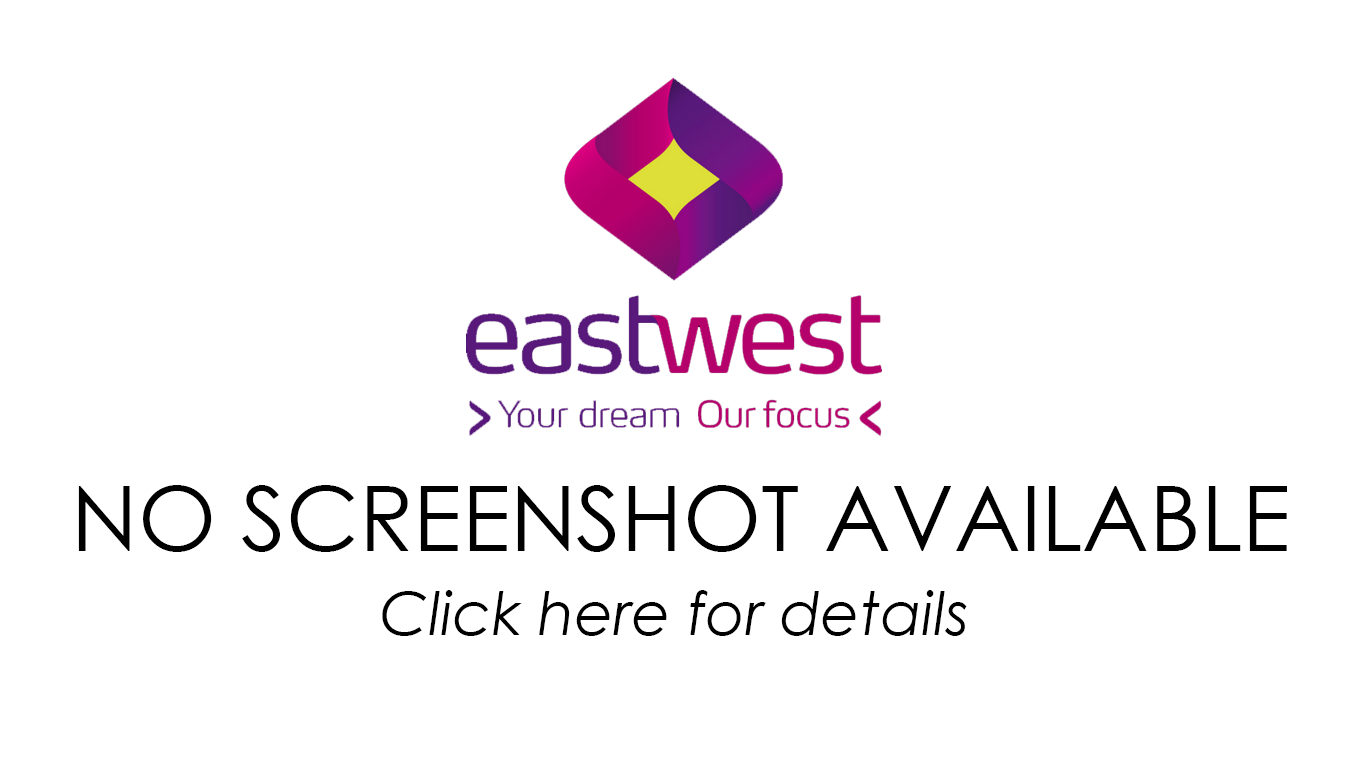
<style>
.page{position:relative;width:1366px;height:768px;background:#ffffff}
.page>*{position:absolute;margin:0}
.t1{font:90px "CenturyGothic";color:#000000}
.t2{font:60px "CenturyGothic-Italic";color:#000000}
</style>
<div class="page">
<p class="t1" style="left:78px;top:485px;width:1209px;height:67px">NO SCREENSHOT AVAILABLE</p>
<p class="t2" style="left:382px;top:590px;width:585px;height:46px">Click here for details</p>
</div>
